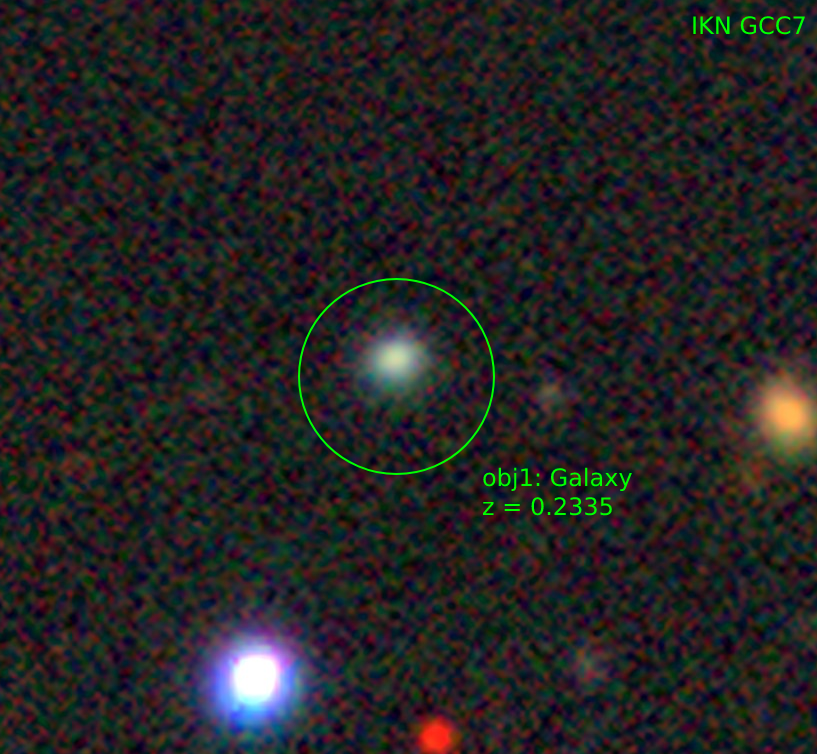
<style>
.page{position:relative;width:817px;height:754px}
.page>*{position:absolute;margin:0}
.t1{font:24px "DejaVuSans";color:#00ff00}
</style>
<div class="page">
<p class="t1" style="left:693px;top:16px;width:112px;height:19px">IKN GCC7</p>
<p class="t1" style="left:483px;top:467px;width:149px;height:49px">obj1: Galaxy<br>z = 0.2335</p>
</div>
